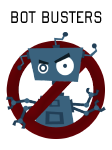
<style>
.page{position:relative;width:112px;height:150px;background:#ffffff}
.page>*{position:absolute;margin:0}
.t1{font:20px "MagdaClean-Regular";letter-spacing:-0.02em;color:#000000;scale:0.86 1}
</style>
<div class="page">
<p class="t1" style="left:11px;top:11px;width:91px;height:12px">BOT BUSTERS</p>
</div>
